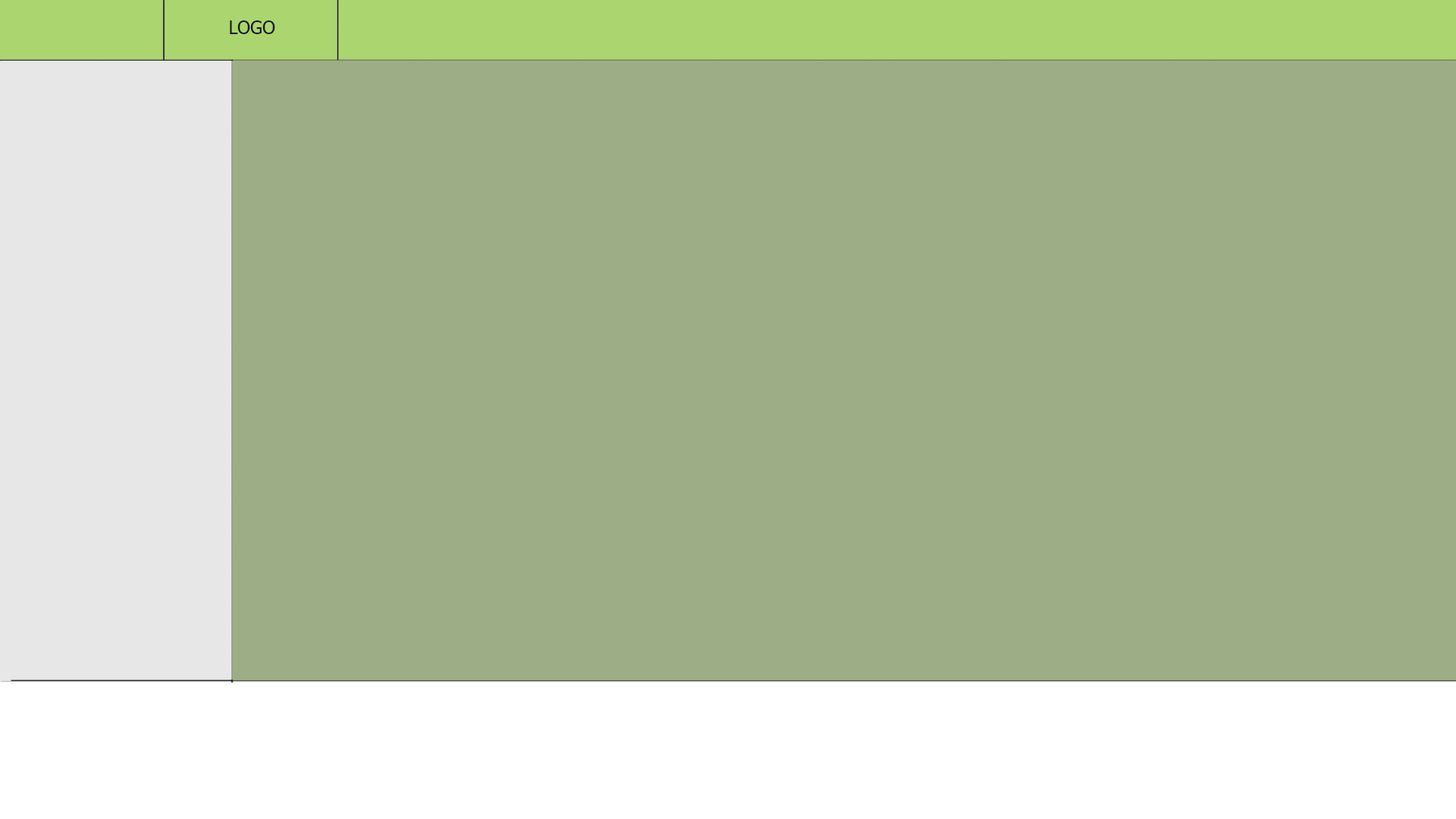
<style>
.page{position:relative;width:1456px;height:819px;background:#9dad86}
.page>*{position:absolute;margin:0}
.t1{font:18.2px "Tahoma";color:#151515}
</style>
<div class="page">
<p class="t1" style="left:230px;top:20px;width:45px;height:14px">LOGO</p>
</div>
